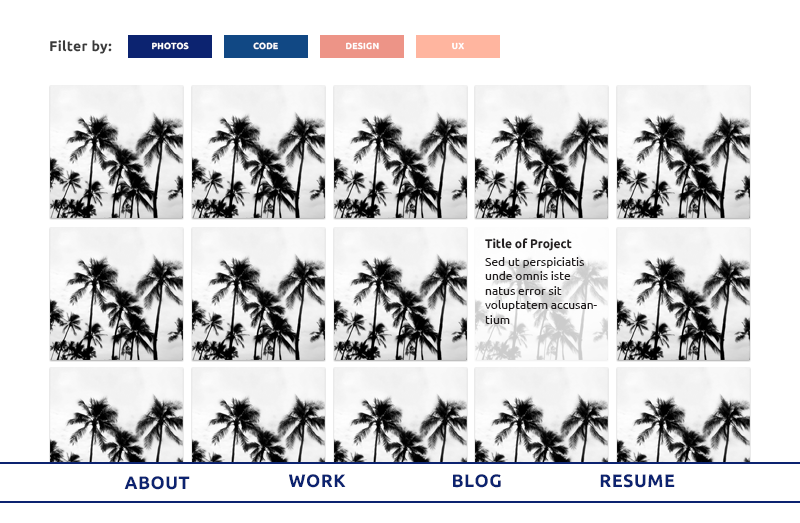
<style>
.page{position:relative;width:800px;height:523px;background:#ffffff}
.page>*{position:absolute;margin:0}
.t1{font:14px "Ubuntu-Bold";letter-spacing:0.025em;color:#3a3a3a}
.t2{font:8.8px "Ubuntu-Bold";letter-spacing:0.025em;color:#ffffff}
.t3{font:12px "Ubuntu";color:#231f20}
.t4{font:12.6px/14px "Ubuntu-Bold";color:#231f20;scale:0.95 1}
.t5{font:18px "Ubuntu-Bold";letter-spacing:0.025em;color:#0c2370}
</style>
<div class="page">
<p class="t1" style="left:50px;top:40px;width:62px;height:14px">Filter by:</p>
<p class="t2" style="left:152px;top:42px;width:37px;height:8px">PHOTOS</p>
<p class="t2" style="left:253px;top:42px;width:25px;height:8px">CODE</p>
<p class="t2" style="left:346px;top:42px;width:33px;height:8px">DESIGN</p>
<p class="t2" style="left:452px;top:42px;width:12px;height:8px">UX</p>
<p class="t3" style="left:485px;top:238px;width:112px;height:86px"><span class="t4">Title of Project<br></span>Sed ut perspiciatis unde omnis iste natus error sit voluptatem accusantium</p>
<p class="t5" style="left:124px;top:476px;width:66px;height:14px">ABOUT</p>
<p class="t5" style="left:289px;top:474px;width:57px;height:14px">WORK</p>
<p class="t5" style="left:453px;top:474px;width:48px;height:14px">BLOG</p>
<p class="t5" style="left:600px;top:474px;width:75px;height:14px">RESUME</p>
</div>
